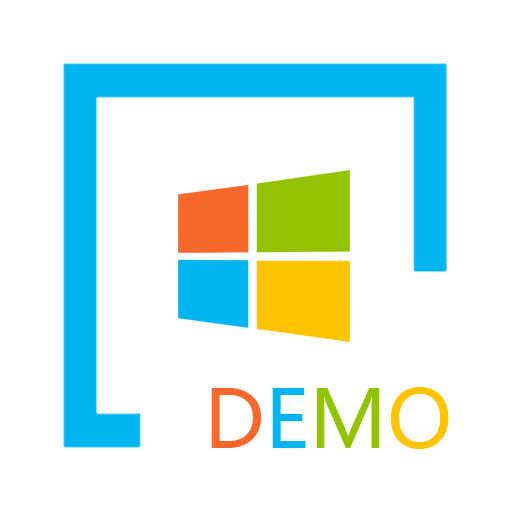
<style>
.page{position:relative;width:512px;height:512px;background:#ffffff}
.page>*{position:absolute;margin:0}
.t1{font:80px "MicrosoftYaHei";color:#f8682c}
.t2{font:80px "MicrosoftYaHei";color:#00b4f1}
.t3{font:80px "MicrosoftYaHei";color:#91c300}
.t4{font:80px "MicrosoftYaHei";color:#ffc300}
</style>
<div class="page">
<p class="t1" style="left:211px;top:387px;width:238px;height:62px">D<span class="t2">E</span><span class="t3">M</span><span class="t4">O</span></p>
</div>
